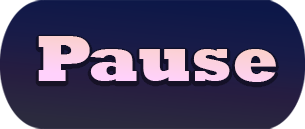
<style>
.page{position:relative;width:305px;height:129px}
.page>*{position:absolute;margin:0}
.t1{font:66.7px "Rockwell-ExtraBold";color:#fdd1e6}
</style>
<div class="page">
<p class="t1" style="left:38px;top:36px;width:238px;height:46px">Pause</p>
</div>
